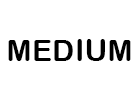
<style>
.page{position:relative;width:140px;height:100px;background:#ffffff}
.page>*{position:absolute;margin:0}
.t1{font:30px "ArialRoundedMTBold";letter-spacing:0.01em;color:#000000}
</style>
<div class="page">
<p class="t1" style="left:8px;top:39px;width:123px;height:22px">MEDIUM</p>
</div>
